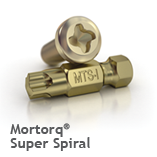
<style>
.page{position:relative;width:157px;height:157px;background:#ffffff}
.page>*{position:absolute;margin:0}
.t1{font:14px/14px "TrebuchetMS-Bold";letter-spacing:0.01em;color:#58595b}
</style>
<div class="page">
<p class="t1" style="left:10px;top:123px;width:80px;height:28px">Mortorq®  <br>Super Spiral</p>
</div>
